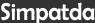
<style>
.page{position:relative;width:95px;height:23px;background:#333333}
.page>*{position:absolute;margin:0}
.t1{font:24.4px "BerlinSansFB-Reg";color:#ffffff;scale:0.95 1}
</style>
<div class="page">
<p class="t1" style="left:1px;top:2px;width:94px;height:22px">Simpatda</p>
</div>
